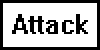
<style>
.page{position:relative;width:100px;height:50px;background:#ffffff}
.page>*{position:absolute;margin:0}
.t1{font:30px "System";color:#000000}
</style>
<div class="page">
<p class="t1" style="left:12px;top:14px;width:76px;height:20px">Attack</p>
</div>
